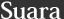
<style>
.page{position:relative;width:64px;height:19px;background:#333333}
.page>*{position:absolute;margin:0}
.t1{font:24px "HeiseiMinStd-W7";color:#ffffff}
</style>
<div class="page">
<p class="t1" style="left:1px;top:1px;width:60px;height:18px">Suara</p>
</div>
